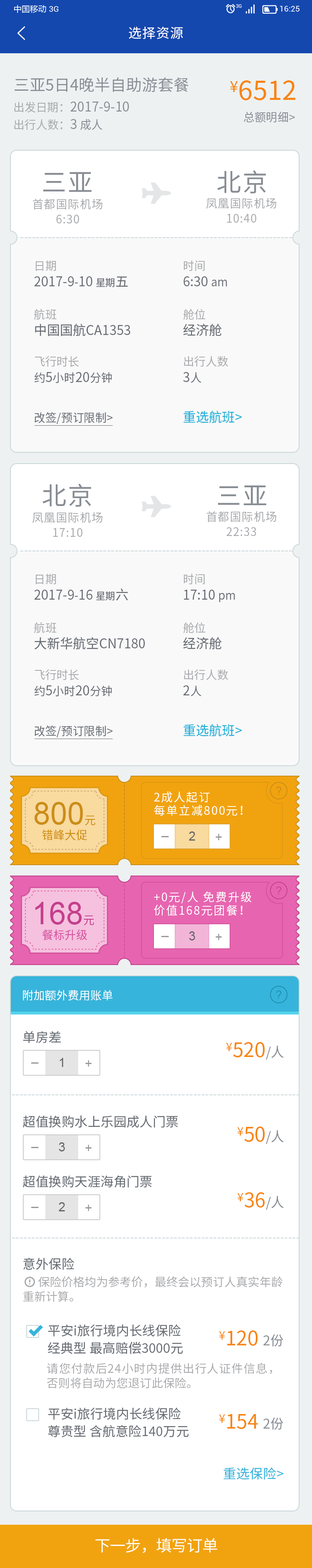
<style>
.page{position:relative;width:312px;height:1568px;background:#ffffff}
.page>*{position:absolute;margin:0}
.t1{font:13.3px "SourceHanSansCN-Regular";letter-spacing:0.05em;color:#ffffff}
.t2{font:15.8px "SourceHanSansCN-Regular";color:#888d94}
.t3{font:26.2px "SourceHanSansCN-Regular";color:#f88412}
.t4{font:15.3px "SourceHanSansCN-Regular";color:#f88412}
.t5{font:13.3px/17.5px "SourceHanSansCN-Regular";color:#888d94}
.t6{font:11.7px/17.5px "SourceHanSansCN-Regular";color:#a9aaad}
.t7{font:11.7px/17.5px "SourceHanSansCN-Regular";color:#888d94}
.t8{font:11.7px "SourceHanSansCN-Regular";color:#888d94}
.t9{font:25px "SourceHanSansCN-Regular";letter-spacing:0.05em;color:#888d94}
.t10{font:11.7px/15px "SourceHanSansCN-Regular";letter-spacing:0.05em;color:#a9aaad}
.t11{font:11.4px "SourceHanSansCN-Regular";color:#cad7da}
.t12{font:13.3px/15px "SourceHanSansCN-Regular";color:#676c73}
.t13{font:11.7px/15px "SourceHanSansCN-Regular";color:#a9aaad}
.t14{font:11.7px/15px "SourceHanSansCN-Regular";color:#676c73}
.t15{font:10px/15px "SourceHanSansCN-Regular";color:#676c73}
.t16{font:11.7px "SourceHanSansCN-Regular";color:#676c73}
.t17{font:13.3px "SourceHanSansCN-Regular";color:#1aafd9}
.t18{font:11.4px/17.1px "SourceHanSansCN-Regular";color:#cb8d17}
.t19{font:11.7px/13.3px "SourceHanSansCN-Regular";letter-spacing:0.1em;color:#ffffff}
.t20{font:11.4px "ArialMT";letter-spacing:0.1em;color:#cb8d17}
.t21{font:31.2px "ArialMT";color:#cb8d17}
.t22{font:11.7px "SourceHanSansCN-Regular";color:#cb8d17}
.t23{font:11.7px "SourceHanSansCN-Regular";color:#cf8d0f}
.t24{font:12.5px "ArialMT";color:#666666}
.t25{font:12.5px "ArialMT";color:#999999}
.t26{font:11.4px/17.1px "SourceHanSansCN-Regular";color:#d4539d}
.t27{font:11.6px/13.3px "SourceHanSansCN-Regular";letter-spacing:0.1em;color:#ffffff}
.t28{font:11.4px "ArialMT";letter-spacing:0.1em;color:#c74891}
.t29{font:31.2px "ArialMT";color:#c43f8c}
.t30{font:11.6px "SourceHanSansCN-Regular";color:#c43f8c}
.t31{font:11.6px "SourceHanSansCN-Regular";color:#d6519e}
.t32{font:11.4px "SourceHanSansCN-Regular";color:#ffffff}
.t33{font:11.4px "ArialMT";letter-spacing:0.1em;color:#1e90b4}
.t34{font:13px "SourceHanSansCN-Regular";color:#676c73}
.t35{font:20px "SourceHanSansCN-Regular";color:#f88412}
.t36{font:11.7px "SourceHanSansCN-Regular";color:#f88412}
.t37{font:13.3px "SourceHanSansCN-Regular";color:#888d94}
.t38{font:11.7px/14.6px "SourceHanSansCN-Regular";color:#a9aaad}
.t39{font:13px/17.5px "SourceHanSansCN-Regular";color:#676c73}
.t40{font:13.3px "SourceHanSansCN-Regular";color:#37b4db}
.t41{font:15.8px "SourceHanSansCN-Regular";letter-spacing:-0.025em;color:#fffefe}
</style>
<div class="page">
<p class="t1" style="left:129px;top:27px;width:54px;height:12px">选择资源</p>
<p class="t2" style="left:15px;top:77px;width:174px;height:15px">三亚5日4晚半自助游套餐</p>
<p class="t3" style="left:230px;top:80px;width:65px;height:20px"><span class="t4">¥</span>6512</p>
<p class="t5" style="left:14px;top:102px;width:115px;height:28px"><span class="t6">出发日期：</span>2017-9-10<br><span class="t6">出行人数：</span>3<span class="t7"> 成人</span></p>
<p class="t8" style="left:244px;top:112px;width:51px;height:11px">总额明细&gt;</p>
<p class="t9" style="left:43px;top:172px;width:49px;height:20px">三亚</p>
<p class="t9" style="left:217px;top:170px;width:49px;height:24px">北京</p>
<p class="t10" style="left:206px;top:198px;width:70px;height:25px;text-align:center">凤凰国际机场<br>10:40</p>
<p class="t10" style="left:33px;top:198px;width:69px;height:25px;text-align:center">首都国际机场<br>6:30</p>
<p class="t11" style="left:20px;top:237px;width:276px;height:1px">----------------------------------------------------------------------</p>
<p class="t12" style="left:34px;top:261px;width:94px;height:26px"><span class="t13">日期<br></span>2017-9<span class="t14">-</span>10 <span class="t15">星期</span>五</p>
<p class="t12" style="left:184px;top:260px;width:43px;height:26px"><span class="t13">时间<br></span>6:30 <span class="t14">am</span></p>
<p class="t12" style="left:34px;top:309px;width:96px;height:27px"><span class="t13">航班<br></span>中国国航CA1353</p>
<p class="t12" style="left:183px;top:309px;width:39px;height:27px"><span class="t13">舱位<br></span>经济舱</p>
<p class="t13" style="left:35px;top:356px;width:77px;height:27px">飞行时长<br><span class="t14">约</span><span class="t12">5</span><span class="t14">小时</span><span class="t12">20</span><span class="t14">分钟</span></p>
<p class="t13" style="left:183px;top:356px;width:45px;height:27px">出行人数<br><span class="t12">3</span><span class="t14">人</span></p>
<p class="t16" style="left:35px;top:412px;width:78px;height:12px">改签/预订限制&gt;</p>
<p class="t17" style="left:184px;top:411px;width:58px;height:12px">重选航班&gt;</p>
<p class="t9" style="left:42px;top:484px;width:49px;height:23px">北京</p>
<p class="t9" style="left:218px;top:485px;width:48px;height:20px">三亚</p>
<p class="t10" style="left:32px;top:512px;width:70px;height:25px;text-align:center">凤凰国际机场<br>17:10</p>
<p class="t10" style="left:207px;top:511px;width:69px;height:25px;text-align:center">首都国际机场<br>22:33</p>
<p class="t11" style="left:20px;top:551px;width:276px;height:0px">----------------------------------------------------------------------</p>
<p class="t12" style="left:34px;top:574px;width:94px;height:26px"><span class="t13">日期<br></span>2017-9<span class="t14">-</span>16 <span class="t15">星期</span>六</p>
<p class="t12" style="left:184px;top:573px;width:51px;height:29px"><span class="t13">时间<br></span>17:10 <span class="t14">pm</span></p>
<p class="t12" style="left:34px;top:622px;width:111px;height:28px"><span class="t13">航班<br></span>大新华航空CN7180</p>
<p class="t12" style="left:183px;top:622px;width:39px;height:28px"><span class="t13">舱位<br></span>经济舱</p>
<p class="t13" style="left:35px;top:669px;width:77px;height:28px">飞行时长<br><span class="t14">约</span><span class="t12">5</span><span class="t14">小时</span><span class="t12">20</span><span class="t14">分钟</span></p>
<p class="t13" style="left:183px;top:669px;width:45px;height:27px">出行人数<br><span class="t12">2</span><span class="t14">人</span></p>
<p class="t16" style="left:35px;top:725px;width:78px;height:12px">改签/预订限制&gt;</p>
<p class="t17" style="left:184px;top:724px;width:58px;height:13px">重选航班&gt;</p>
<p class="t18" style="left:124px;top:773px;width:1px;height:93px">------------------------</p>
<p class="t19" style="left:154px;top:791px;width:89px;height:25px">2成人起订<br>每单立减800元！</p>
<p class="t20" style="left:276px;top:786px;width:6px;height:9px">?</p>
<p class="t21" style="left:35px;top:802px;width:60px;height:24px">800<span class="t22">元</span></p>
<p class="t23" style="left:42px;top:829px;width:45px;height:12px">错峰大促</p>
<p class="t24" style="left:189px;top:831px;width:6px;height:10px">2</p>
<p class="t25" style="left:216px;top:834px;width:6px;height:6px">+</p>
<p class="t25" style="left:161px;top:836px;width:8px;height:1px">_</p>
<p class="t26" style="left:124px;top:873px;width:1px;height:93px">------------------------</p>
<p class="t27" style="left:154px;top:891px;width:98px;height:25px">+0元/人 免费升级<br>价值168元团餐！</p>
<p class="t28" style="left:276px;top:886px;width:6px;height:9px">?</p>
<p class="t29" style="left:35px;top:902px;width:59px;height:23px">168<span class="t30">元</span></p>
<p class="t31" style="left:42px;top:929px;width:45px;height:11px">餐标升级</p>
<p class="t25" style="left:161px;top:936px;width:8px;height:1px">_</p>
<p class="t24" style="left:189px;top:931px;width:6px;height:9px">3</p>
<p class="t25" style="left:216px;top:934px;width:6px;height:6px">+</p>
<p class="t32" style="left:23px;top:990px;width:90px;height:11px">附加额外费用账单</p>
<p class="t33" style="left:276px;top:990px;width:6px;height:9px">?</p>
<p class="t34" style="left:23px;top:1031px;width:38px;height:12px">单房差</p>
<p class="t35" style="left:226px;top:1042px;width:58px;height:17px"><span class="t36">¥</span>520<span class="t37">/人</span></p>
<p class="t24" style="left:60px;top:1058px;width:3px;height:9px">1</p>
<p class="t25" style="left:85px;top:1060px;width:7px;height:7px">+</p>
<p class="t25" style="left:31px;top:1062px;width:8px;height:2px">_</p>
<p class="t34" style="left:23px;top:1115px;width:155px;height:13px">超值换购水上乐园成人门票</p>
<p class="t35" style="left:237px;top:1126px;width:47px;height:18px"><span class="t36">¥</span>50<span class="t37">/人</span></p>
<p class="t24" style="left:59px;top:1142px;width:6px;height:9px">3</p>
<p class="t25" style="left:85px;top:1145px;width:7px;height:6px">+</p>
<p class="t25" style="left:31px;top:1147px;width:8px;height:1px">_</p>
<p class="t34" style="left:23px;top:1175px;width:129px;height:13px">超值换购天涯海角门票</p>
<p class="t35" style="left:237px;top:1192px;width:47px;height:18px"><span class="t36">¥</span>36<span class="t37">/人</span></p>
<p class="t24" style="left:59px;top:1202px;width:6px;height:9px">2</p>
<p class="t25" style="left:85px;top:1205px;width:7px;height:6px">+</p>
<p class="t25" style="left:31px;top:1207px;width:8px;height:1px">_</p>
<p class="t34" style="left:23px;top:1258px;width:51px;height:12px">意外保险</p>
<p class="t38" style="left:23px;top:1276px;width:260px;height:26px">保险价格均为参考价，最终会以预订人真实年龄重新计算。</p>
<p class="t39" style="left:48px;top:1324px;width:135px;height:30px">平安i旅行境内长线保险<br>经典型 最高赔偿3000元</p>
<p class="t35" style="left:219px;top:1330px;width:64px;height:17px"><span class="t36">¥</span>120 <span class="t37">2份</span></p>
<p class="t38" style="left:47px;top:1363px;width:225px;height:26px;text-align:justify">请您付款后24小时内提供出行人证件信息，否则将自动为您退订此保险。</p>
<p class="t39" style="left:48px;top:1407px;width:141px;height:30px">平安i旅行境内长线保险 <br>尊贵型 含航意险140万元</p>
<p class="t35" style="left:219px;top:1414px;width:64px;height:16px"><span class="t36">¥</span>154 <span class="t37">2份</span></p>
<p class="t40" style="left:223px;top:1467px;width:60px;height:13px">重选保险&gt;</p>
<p class="t41" style="left:95px;top:1538px;width:122px;height:15px">下一步，填写订单</p>
</div>
